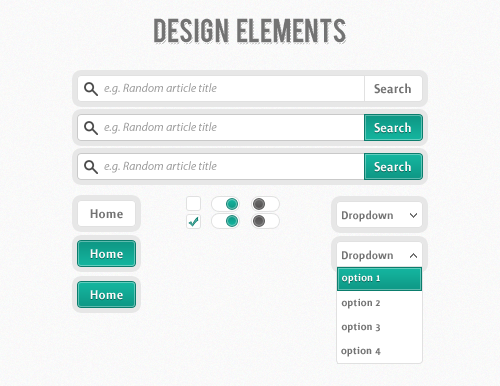
<style>
.page{position:relative;width:500px;height:386px}
.page>*{position:absolute;margin:0}
.t1{font:26px "Bebas";color:#737373}
.t2{font:26px "Bebas"}
.t3{font:12px "MyriadPro-It";color:#999999}
.t4{font:16px "Surface-Medium";color:#737373}
.t5{font:16px "Surface-Medium";color:#f9f9f9}
.t6{font:14px "Surface-Medium";color:#737373}
.t7{font:13px "Surface-Medium";color:#f9f9f9}
.t8{font:13px "Surface-Medium";color:#737373}
</style>
<div class="page">
<p class="t1" style="left:154px;top:18px;width:192px;height:25px">Design   elements</p>
<p class="t2" style="left:155px;top:20px;width:192px;height:25px">Design   elements</p>
<p class="t3" style="left:104px;top:83px;width:113px;height:12px">e.g. Random article title</p>
<p class="t4" style="left:374px;top:83px;width:37px;height:11px">Search</p>
<p class="t3" style="left:104px;top:122px;width:113px;height:12px">e.g. Random article title</p>
<p class="t5" style="left:374px;top:122px;width:37px;height:11px">Search</p>
<p class="t3" style="left:104px;top:161px;width:113px;height:12px">e.g. Random article title</p>
<p class="t5" style="left:374px;top:161px;width:37px;height:11px">Search</p>
<p class="t4" style="left:90px;top:209px;width:33px;height:10px">Home</p>
<p class="t6" style="left:342px;top:210px;width:51px;height:12px">Dropdown</p>
<p class="t5" style="left:90px;top:249px;width:33px;height:10px">Home</p>
<p class="t6" style="left:342px;top:250px;width:51px;height:12px">Dropdown</p>
<p class="t7" style="left:342px;top:273px;width:38px;height:11px">option 1</p>
<p class="t5" style="left:90px;top:290px;width:33px;height:10px">Home</p>
<p class="t8" style="left:341px;top:298px;width:39px;height:11px">option 2</p>
<p class="t8" style="left:341px;top:322px;width:39px;height:11px">option 3</p>
<p class="t8" style="left:341px;top:346px;width:40px;height:11px">option 4</p>
</div>
